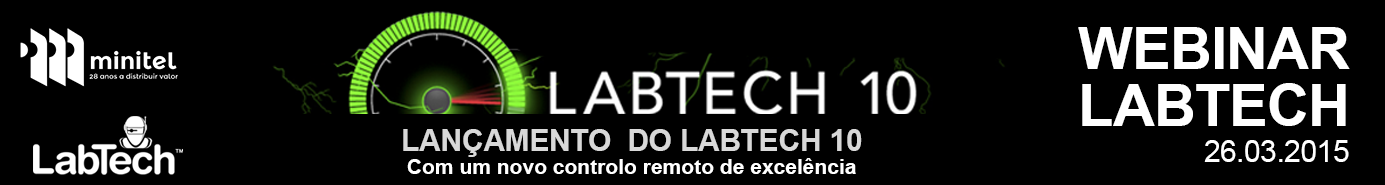
<style>
.page{position:relative;width:1385px;height:185px;background:#000000}
.page>*{position:absolute;margin:0}
.t1{font:58.3px "Arial-BoldMT";letter-spacing:-0.019em;color:#ffffff}
.t2{font:21px/22.9px "Arial-BoldMT";color:#ffffff}
.t3{font:29.6px "Arial-BoldMT";color:#d8d8d8;text-transform:uppercase}
.t4{font:30.2px "ArialMT";letter-spacing:-0.019em;color:#ffffff}
</style>
<div class="page">
<p class="t1" style="left:1078px;top:27px;width:272px;height:42px">WEBINAR</p>
<p class="t1" style="left:1082px;top:83px;width:264px;height:43px">LABTECH</p>
<p class="t2" style="left:403px;top:129px;width:459px;height:45px;text-align:center"><span class="t3">Lançamento  do Labtech 10<br></span>Com um novo controlo remoto de excelência</p>
<p class="t4" style="left:1204px;top:140px;width:145px;height:22px">26.03.2015</p>
</div>
